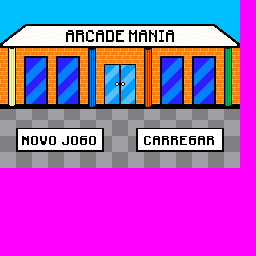
<style>
.page{position:relative;width:256px;height:256px;background:#ff00ff}
.page>*{position:absolute;margin:0}
.t1{font:14.2px "Minecraftia-Regular";color:#000000;scale:0.9 1}
.t2{font:10.7px "Minecraftia-Regular";color:#000000;font-weight:bold;scale:0.9 1}
</style>
<div class="page">
<p class="t1" style="left:66px;top:30px;width:108px;height:12px">ARCADE MANIA</p>
<p class="t2" style="left:22px;top:136px;width:74px;height:9px">NOVO JOGO</p>
<p class="t2" style="left:144px;top:136px;width:70px;height:9px">CARREGAR</p>
</div>
